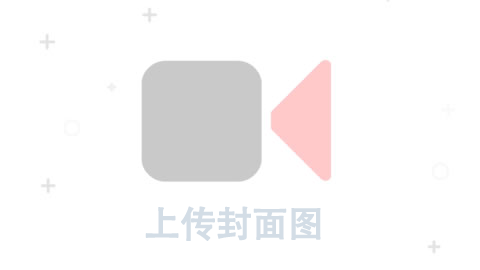
<style>
.page{position:relative;width:480px;height:270px;background:#ffffff}
.page>*{position:absolute;margin:0}
.t1{font:36px "AdobeHeitiStd-Regular";letter-spacing:-0.029em;color:#d3dde6;font-weight:bold}
</style>
<div class="page">
<p class="t1" style="left:145px;top:206px;width:176px;height:35px">上传封面图</p>
</div>
